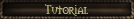
<style>
.page{position:relative;width:134px;height:19px}
.page>*{position:absolute;margin:0}
.t1{font:12px "Morpheus";color:#b9b27c}
</style>
<div class="page">
<p class="t1" style="left:45px;top:4px;width:44px;height:12px">Tutorial</p>
</div>
